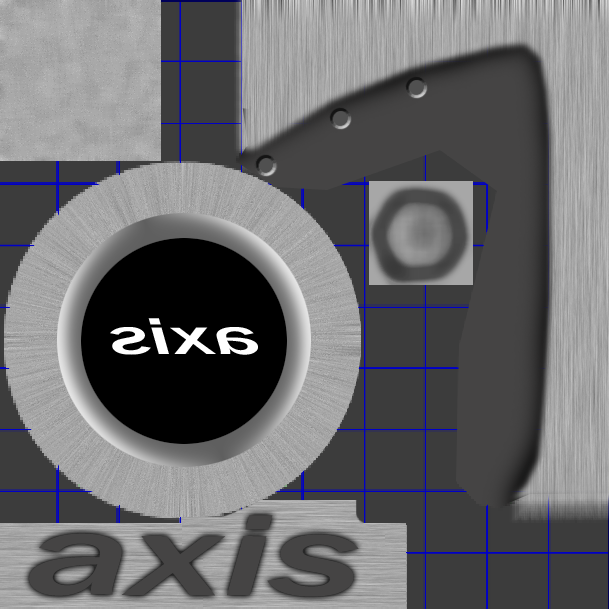
<style>
.page{position:relative;width:609px;height:609px}
.page>*{position:absolute;margin:0}
.t1{font:118.5px "FranklinGothic-MediumItalic";color:#454444;scale:1.67 1}
</style>
<div class="page">
<p class="t1" style="left:29px;top:515px;width:330px;height:82px">axis</p>
</div>
